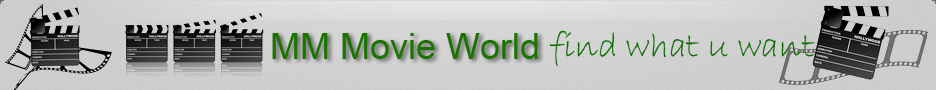
<style>
.page{position:relative;width:936px;height:90px}
.page>*{position:absolute;margin:0}
.t1{font:36px "BradleyHandITC";color:#0d6d03}
.t2{font:36px "ArialMT";color:#1b7400}
</style>
<div class="page">
<p class="t1" style="left:549px;top:30px;width:266px;height:37px">find what u want</p>
<p class="t2" style="left:272px;top:33px;width:266px;height:26px">MM Movie World</p>
</div>
